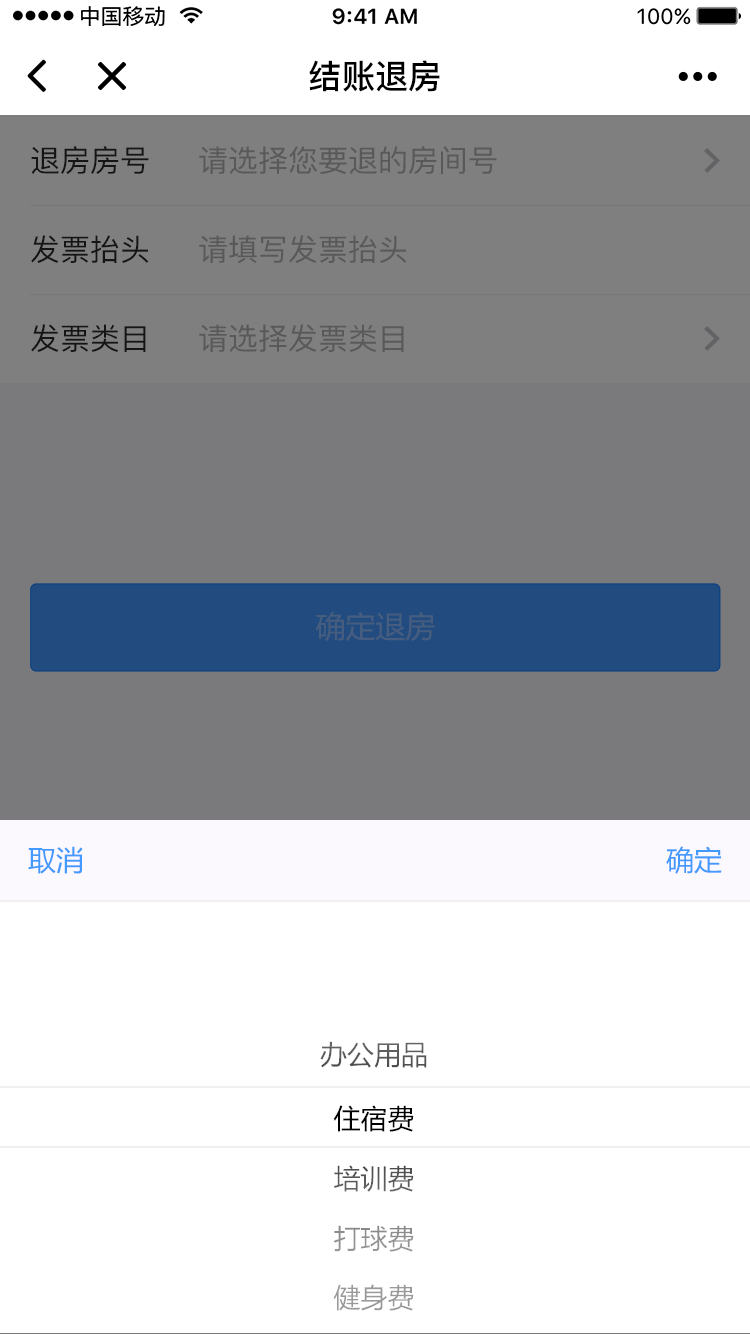
<style>
.page{position:relative;width:750px;height:1334px;background:#ffffff}
.page>*{position:absolute;margin:0}
.t1{font:33.2px "PingFang-SC-Bold";color:#000000}
.t2{font:30px "PingFang-SC-Medium";color:#2b2b2b}
.t3{font:30px "PingFang-SC-Medium";color:#595959}
.t4{font:30px "MicrosoftYaHei";color:#465d7f}
.t5{font:28px "MicrosoftYaHei";color:#4499ff}
.t6{font:27px "MicrosoftYaHei";color:#595959}
.t7{font:27px "MicrosoftYaHei";color:#000000}
.t8{font:27px "MicrosoftYaHei";color:#565656}
.t9{font:27px "MicrosoftYaHei";color:#8f8f8f}
.t10{font:27px "MicrosoftYaHei";color:#999999}
</style>
<div class="page">
<p class="t1" style="left:309px;top:60px;width:131px;height:32px">结账退房</p>
<p class="t2" style="left:31px;top:146px;width:118px;height:28px">退房房号</p>
<p class="t3" style="left:199px;top:146px;width:298px;height:29px">请选择您要退的房间号</p>
<p class="t2" style="left:31px;top:235px;width:118px;height:28px">发票抬头</p>
<p class="t3" style="left:199px;top:235px;width:208px;height:28px">请填写发票抬头</p>
<p class="t2" style="left:31px;top:324px;width:115px;height:28px">发票类目</p>
<p class="t3" style="left:199px;top:324px;width:205px;height:28px">请选择发票类目</p>
<p class="t4" style="left:315px;top:612px;width:120px;height:29px">确定退房</p>
<p class="t5" style="left:28px;top:846px;width:55px;height:28px">取消</p>
<p class="t5" style="left:666px;top:846px;width:56px;height:28px">确定</p>
<p class="t6" style="left:320px;top:1041px;width:107px;height:27px">办公用品</p>
<p class="t7" style="left:333px;top:1105px;width:81px;height:27px">住宿费</p>
<p class="t8" style="left:334px;top:1165px;width:80px;height:27px">培训费</p>
<p class="t9" style="left:333px;top:1225px;width:81px;height:27px">打球费</p>
<p class="t10" style="left:333px;top:1284px;width:81px;height:27px">健身费</p>
</div>
